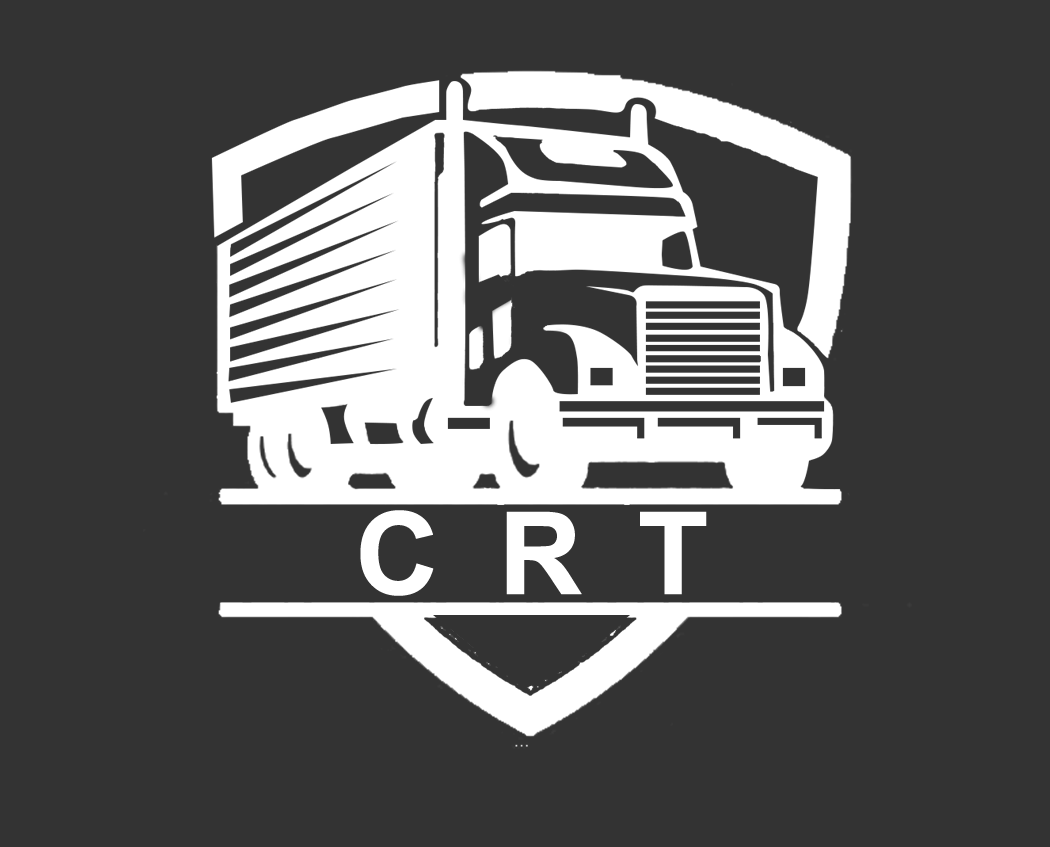
<style>
.page{position:relative;width:1050px;height:847px;background:#333333}
.page>*{position:absolute;margin:0}
.t1{font:114.6px "Arial-BoldMT";color:#ffffff;font-weight:bold}
</style>
<div class="page">
<p class="t1" style="left:360px;top:510px;width:74px;height:86px">C</p>
<p class="t1" style="left:506px;top:511px;width:76px;height:84px">R</p>
<p class="t1" style="left:640px;top:511px;width:67px;height:84px">T</p>
</div>
